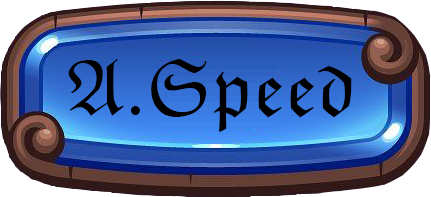
<style>
.page{position:relative;width:431px;height:197px}
.page>*{position:absolute;margin:0}
.t1{font:80px "EuclidFraktur";color:#000000}
</style>
<div class="page">
<p class="t1" style="left:68px;top:59px;width:284px;height:73px">A.Speed</p>
</div>
